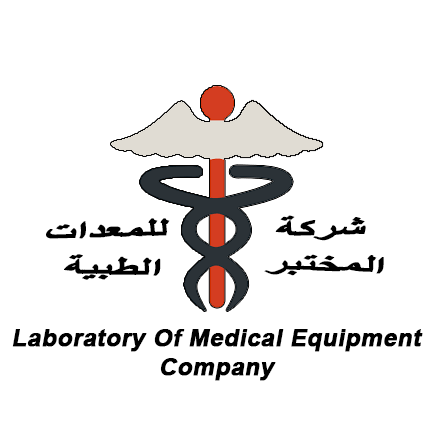
<style>
.page{position:relative;width:435px;height:434px;background:#ffffff}
.page>*{position:absolute;margin:0}
.t1{font:26.3px "Arial-BoldMT";color:#000000;font-weight:bold;font-style:italic;scale:1.75 1}
.t2{font:24px "Arial-BoldMT";color:#000000;font-weight:bold;font-style:italic}
</style>
<div class="page">
<p class="t1" style="left:46px;top:218px;width:124px;height:21px;rotate:-2deg">للمعدات</p>
<p class="t1" style="left:275px;top:215px;width:91px;height:26px;rotate:-1deg">شركة</p>
<p class="t1" style="left:64px;top:254px;width:97px;height:26px">الطبية</p>
<p class="t1" style="left:264px;top:254px;width:120px;height:22px;rotate:2deg">المختبر</p>
<p class="t2" style="left:12px;top:329px;width:411px;height:52px;text-align:center">Laboratory Of Medical Equipment<br>Company</p>
</div>
